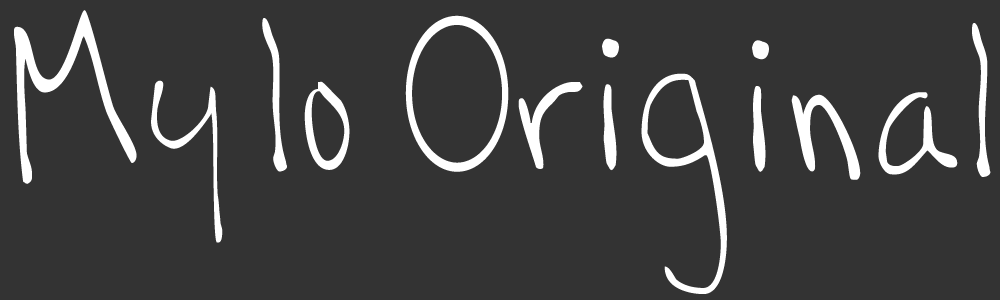
<style>
.page{position:relative;width:1000px;height:300px;background:#333333}
.page>*{position:absolute;margin:0}
.t1{font:224px "Handskrib";letter-spacing:0.002em;color:#ffffff;scale:0.62 1}
.t2{font:224px "SpeedballNo2NF";letter-spacing:0.002em;color:#ffffff;scale:0.62 1}
</style>
<div class="page">
<p class="t1" style="left:14px;top:10px;width:977px;height:284px">Mylo <span class="t2">O</span>riginal</p>
</div>
